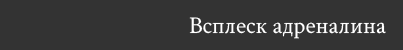
<style>
.page{position:relative;width:403px;height:50px;background:#333333}
.page>*{position:absolute;margin:0}
.t1{font:24px "CrimsonText-Regular";color:#ffffff}
</style>
<div class="page">
<p class="t1" style="left:189px;top:17px;width:197px;height:22px">Всплеск адреналина</p>
</div>
